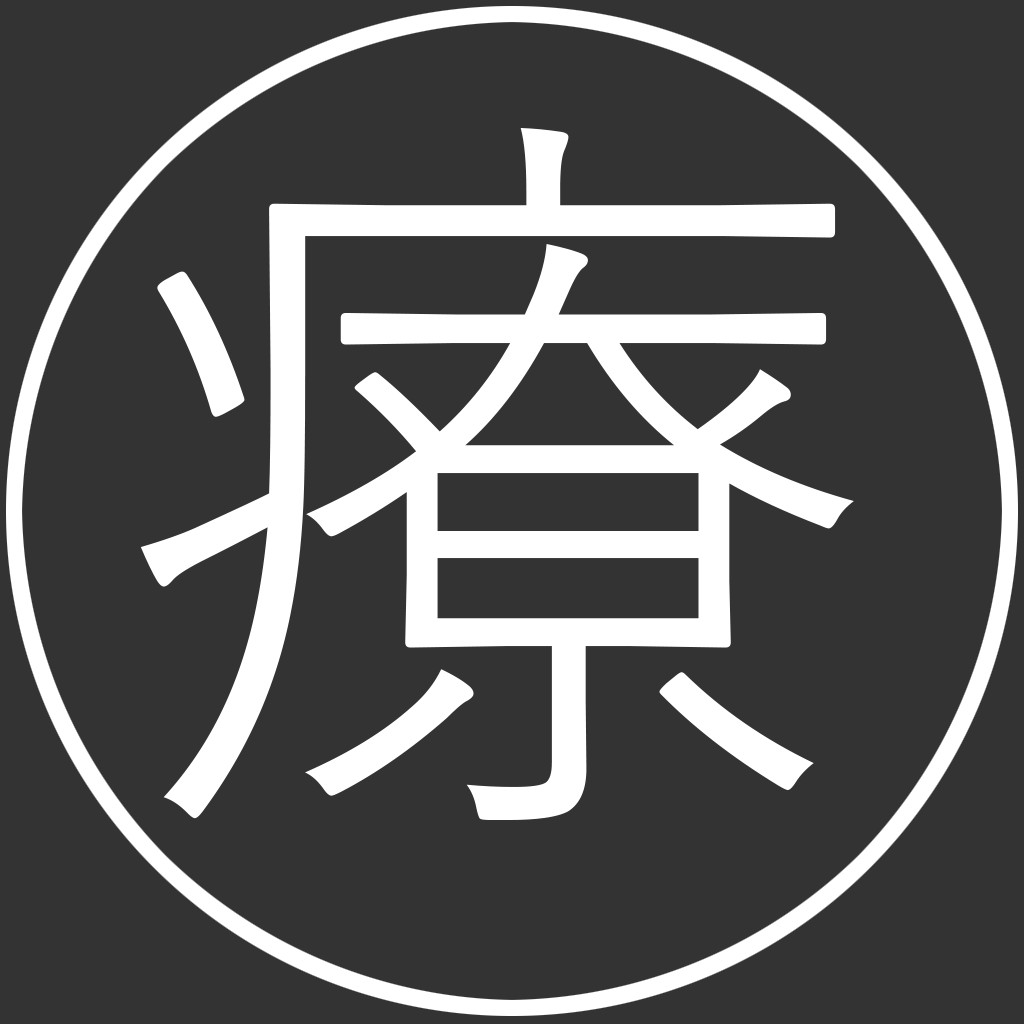
<style>
.page{position:relative;width:1024px;height:1024px;background:#333333}
.page>*{position:absolute;margin:0}
.t1{font:768px "YuGothicUI-Semilight";color:#ffffff}
</style>
<div class="page">
<p class="t1" style="left:140px;top:128px;width:714px;height:692px">療</p>
</div>
